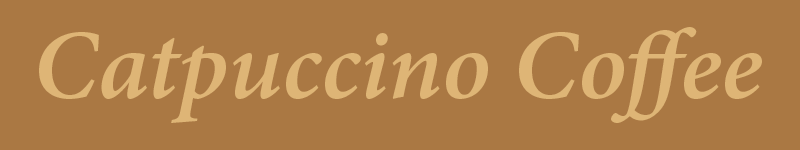
<style>
.page{position:relative;width:800px;height:150px;background:#aa7843}
.page>*{position:absolute;margin:0}
.t1{font:100px "MinionPro-SemiboldIt";color:#deb576}
</style>
<div class="page">
<p class="t1" style="left:39px;top:27px;width:723px;height:96px">Catpuccino Coffee</p>
</div>
